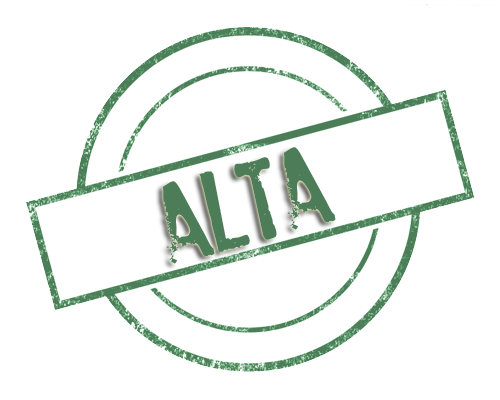
<style>
.page{position:relative;width:500px;height:400px;background:#ffffff}
.page>*{position:absolute;margin:0}
.t1{font:100px "StamPete";color:#4c7d58}
</style>
<div class="page">
<p class="t1" style="left:162px;top:147px;width:174px;height:117px;rotate:-15deg">ALTA</p>
</div>
